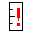
<style>
.page{position:relative;width:32px;height:32px;background:#ffffff}
.page>*{position:absolute;margin:0}
.t1{font:25.1px "Arial-BoldMT";color:#ff0000}
</style>
<div class="page">
<p class="t1" style="left:17px;top:8px;width:3px;height:18px">!</p>
</div>
